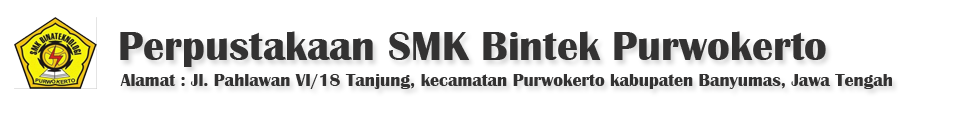
<style>
.page{position:relative;width:970px;height:116px;background:#ffffff}
.page>*{position:absolute;margin:0}
.t1{font:42px "BritannicBold";color:#333232}
.t2{font:18px "BritannicBold";color:#333232}
</style>
<div class="page">
<p class="t1" style="left:120px;top:31px;width:706px;height:36px">Perpustakaan SMK Bintek Purwokerto</p>
<p class="t2" style="left:120px;top:74px;width:772px;height:15px">Alamat : Jl. Pahlawan VI/18 Tanjung, kecamatan Purwokerto kabupaten Banyumas, Jawa Tengah</p>
</div>
